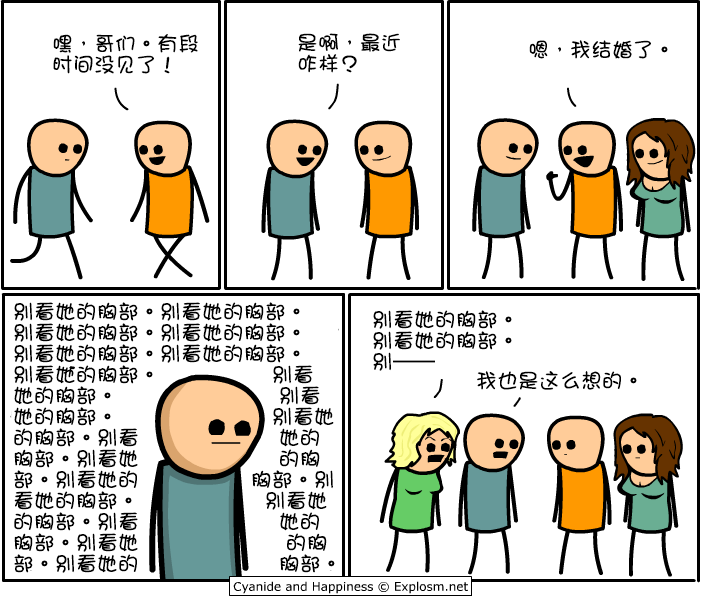
<style>
.page{position:relative;width:701px;height:597px;background:#ffffff}
.page>*{position:absolute;margin:0}
.t1{font:21px/21px "DFGirl";color:#000000}
.t2{font:21px "DFGirl";color:#000000}
</style>
<div class="page">
<p class="t1" style="left:53px;top:34px;width:145px;height:40px">嘿，哥们。有段<br>时间没见了！</p>
<p class="t1" style="left:298px;top:33px;width:102px;height:40px">是啊，最近<br>咋样？</p>
<p class="t2" style="left:529px;top:40px;width:139px;height:19px">嗯，我结婚了。</p>
<p class="t1" style="left:14px;top:302px;width:321px;height:271px">别看她的胸部。别看她的胸部。<br>别看她的胸部。别看她的胸部。<br>别看她的胸部。别看她的胸部。<br>别看她的胸部。                别看<br>她的胸部。                       别看<br>她的胸部。                      别看她<br>的胸部。别看                    她的<br>胸部。别看她                    的胸<br>部。别看她的                胸部。别<br>看她的胸部。                  别看她<br>的胸部。别看                    她的<br>胸部。别看她                     的胸<br>部。别看她的                    胸部。</p>
<p class="t1" style="left:373px;top:310px;width:139px;height:61px">别看她的胸部。<br>别看她的胸部。<br>别——</p>
<p class="t2" style="left:477px;top:371px;width:160px;height:19px">我也是这么想的。</p>
</div>
